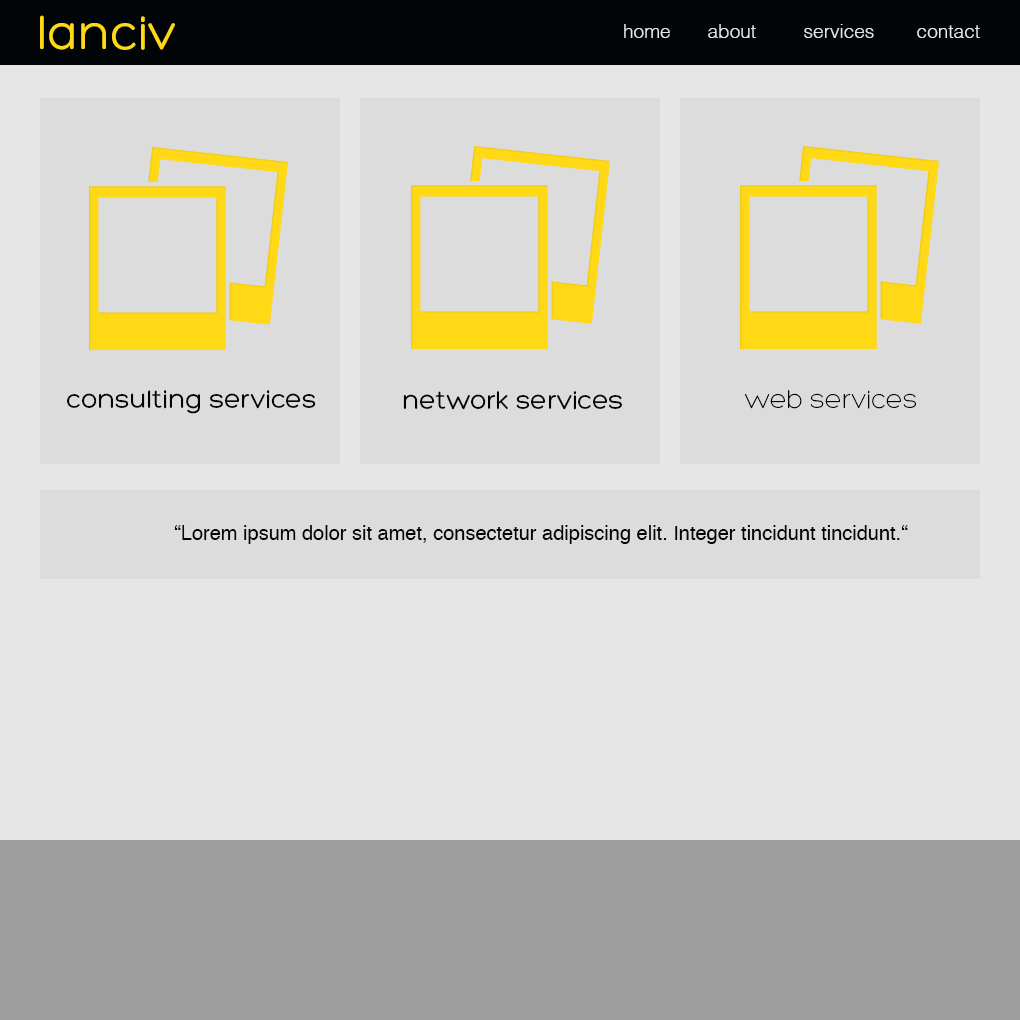
<style>
.page{position:relative;width:1020px;height:1020px;background:#e6e6e6}
.page>*{position:absolute;margin:0}
.t1{font:50px "Hero";color:#ffd816}
.t2{font:19px "Helvetica-Light";color:#e6e6e6}
.t3{font:27px "Hero";color:#020508}
.t4{font:27px "Hero-Light";color:#020508}
.t5{font:20px "Helvetica";color:#020508}
</style>
<div class="page">
<p class="t1" style="left:40px;top:15px;width:135px;height:35px">lanciv</p>
<p class="t2" style="left:624px;top:24px;width:356px;height:14px">home       about         services        contact</p>
<p class="t3" style="left:67px;top:390px;width:249px;height:24px">consulting services</p>
<p class="t4" style="left:744px;top:390px;width:172px;height:19px">web services</p>
<p class="t3" style="left:403px;top:391px;width:219px;height:19px">network services</p>
<p class="t5" style="left:174px;top:525px;width:734px;height:19px">“Lorem ipsum dolor sit amet, consectetur adipiscing elit. Integer tincidunt tincidunt.“</p>
</div>
